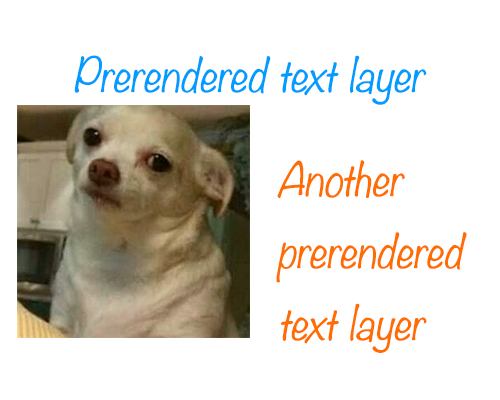
<style>
.page{position:relative;width:500px;height:400px;background:#ffffff}
.page>*{position:absolute;margin:0}
.t1{font:42px "Noteworthy-Light";color:#009cff;font-style:italic}
.t2{font:42px/72px "Noteworthy-Light";color:#ff6c00;font-style:italic}
</style>
<div class="page">
<p class="t1" style="left:74px;top:55px;width:353px;height:50px">Prerendered text layer</p>
<p class="t2" style="left:276px;top:160px;width:191px;height:193px">Another<br>prerendered text layer</p>
</div>
